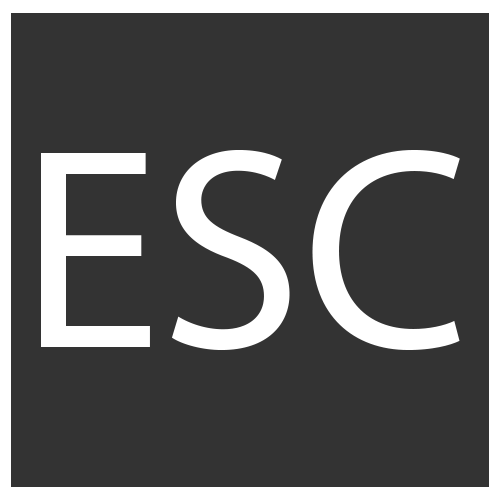
<style>
.page{position:relative;width:500px;height:500px;background:#333333}
.page>*{position:absolute;margin:0}
.t1{font:287.5px "MyriadPro-Regular";color:#ffffff}
</style>
<div class="page">
<p class="t1" style="left:41px;top:150px;width:419px;height:201px">ESC</p>
</div>
